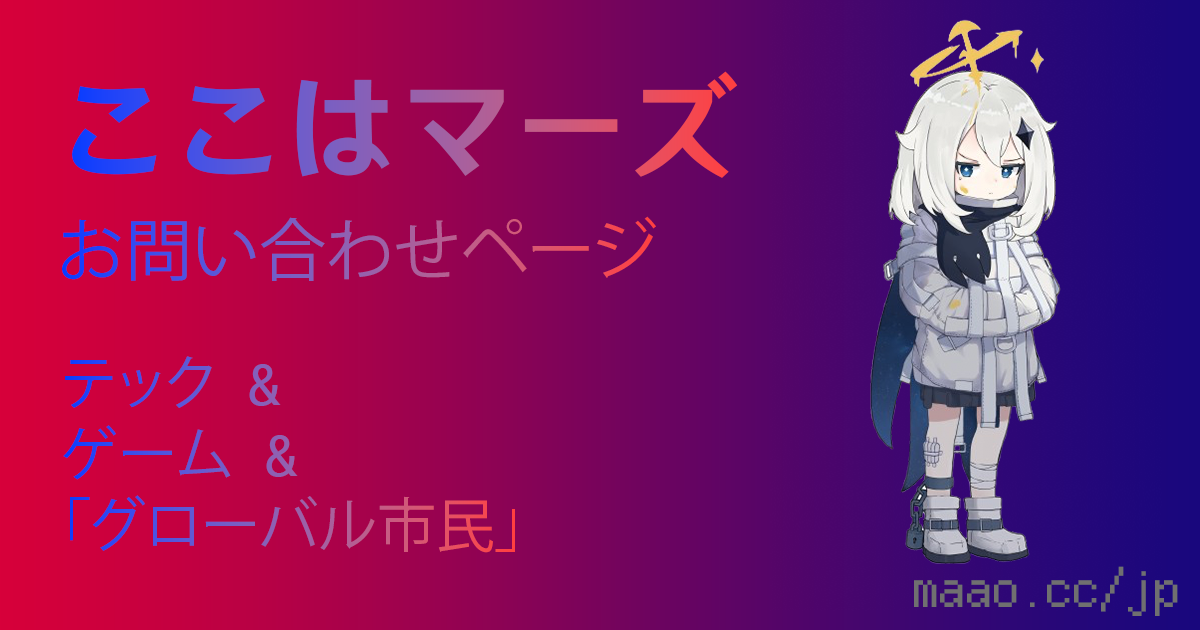
<style>
.page{position:relative;width:1200px;height:630px}
.page>*{position:absolute;margin:0}
.t1{font:114.3px "HYWenHei-HEW"}
.t2{font:67.3px "KozGoPr6N-Regular"}
.t3{font:58.9px "KozGoPr6N-Regular"}
.t4{font:58.9px "Consolas"}
.t5{font:53.5px "ZLabsBitmap_11x12px";color:#707070}
</style>
<div class="page">
<p class="t1" style="left:72px;top:71px;width:666px;height:107px">ここはマーズ</p>
<p class="t2" style="left:62px;top:216px;width:594px;height:65px">お問い合わせページ</p>
<p class="t3" style="left:63px;top:356px;width:452px;height:197px">テック<span class="t4"> &amp;<br></span>ゲーム<span class="t4"> &amp;<br></span>「グローバル市民」</p>
<p class="t5" style="left:914px;top:566px;width:264px;height:50px">maao.cc/jp</p>
</div>
